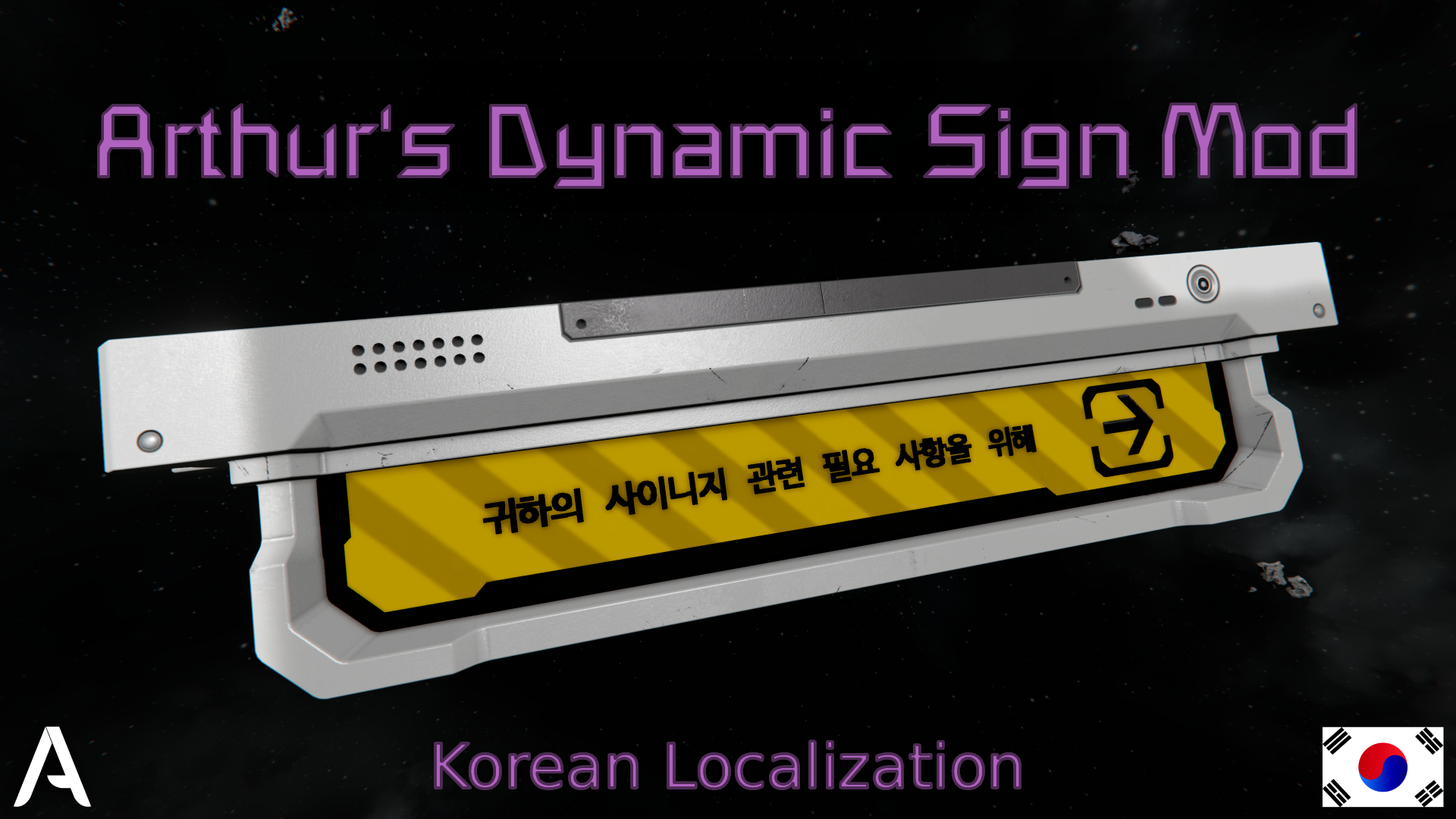
<style>
.page{position:relative;width:1456px;height:819px}
.page>*{position:absolute;margin:0}
.t1{font:100.9px "SpaceEngineers"}
.t2{font:61.4px "SpaceEngineers"}
</style>
<div class="page">
<p class="t1" style="left:98px;top:104px;width:1259px;height:84px">Arthur's Dynamic Sign Mod</p>
<p class="t2" style="left:435px;top:741px;width:586px;height:48px">Korean Localization</p>
</div>
